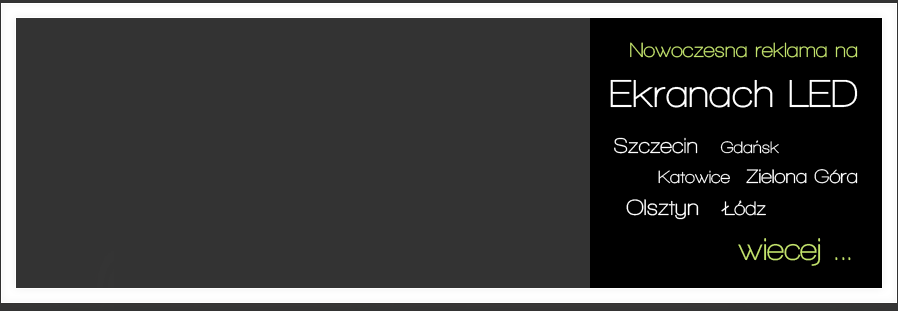
<style>
.page{position:relative;width:898px;height:311px;background:#333333}
.page>*{position:absolute;margin:0}
.t1{font:21px/40px "WalkwayBold";color:#c3e36c}
.t2{font:40px/50px "WalkwayBold";color:#ffffff}
.t3{font:22px "WalkwayBold";color:#ffffff}
.t4{font:17px "WalkwayBold";color:#ffffff}
.t5{font:18px "WalkwayBold";color:#ffffff}
.t6{font:20px "WalkwayBold";color:#ffffff}
.t7{font:23px "WalkwayBold";color:#ffffff}
.t8{font:32px "WalkwayBold";color:#c3e36c}
</style>
<div class="page">
<p class="t1" style="left:610px;top:42px;width:248px;height:66px;text-align:right">Nowoczesna reklama na<br><span class="t2">Ekranach LED</span></p>
<p class="t3" style="left:614px;top:137px;width:84px;height:17px">Szczecin</p>
<p class="t4" style="left:720px;top:141px;width:59px;height:13px">Gdansk</p>
<p class="t5" style="left:658px;top:170px;width:72px;height:14px">Katowice</p>
<p class="t6" style="left:746px;top:169px;width:112px;height:15px">Zielona Góra</p>
<p class="t7" style="left:626px;top:199px;width:73px;height:21px">Olsztyn</p>
<p class="t6" style="left:724px;top:201px;width:42px;height:15px">Lódz</p>
<p class="t8" style="left:738px;top:238px;width:113px;height:28px">wiecej ...</p>
</div>
